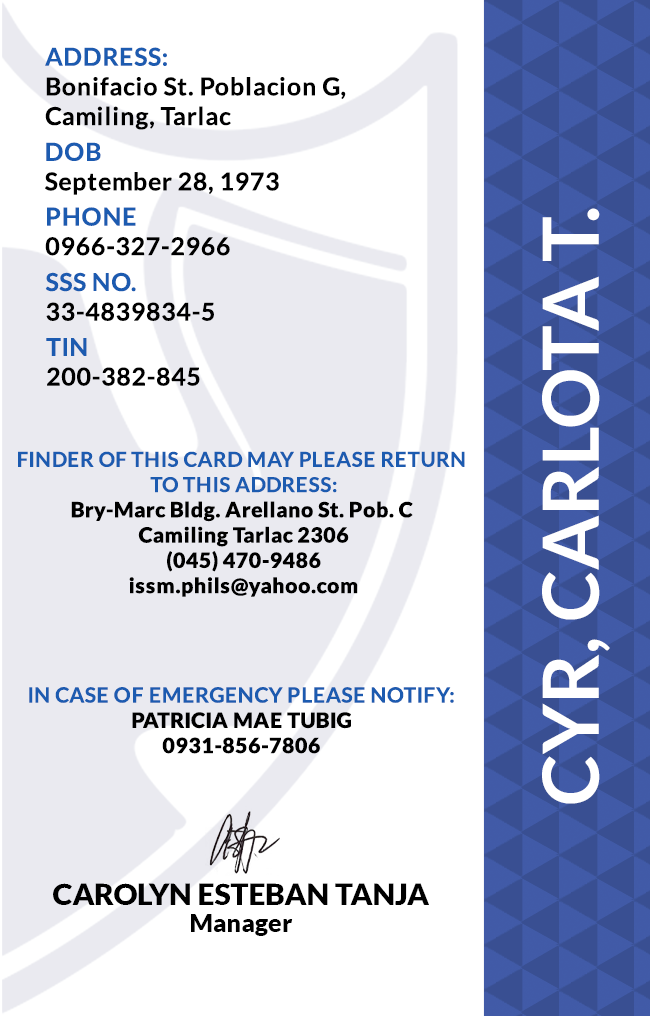
<style>
.page{position:relative;width:650px;height:1016px;background:#ffffff}
.page>*{position:absolute;margin:0}
.t1{font:24.7px/29.6px "Lato-Bold";letter-spacing:0.025em;color:#000000}
.t2{font:24.7px/29.6px "Lato-Bold";letter-spacing:0.025em}
.t3{font:77.6px "Lato-Bold";color:#ffffff}
.t4{font:21.1px "Lato-Black";letter-spacing:0.025em}
.t5{font:20.5px/25.3px "Lato-Bold";letter-spacing:0.025em;text-transform:uppercase}
.t6{font:21.1px/25.3px "Lato-Bold";letter-spacing:0.025em}
.t7{font:29.5px "Lato-Black";color:#000000}
.t8{font:25px "Lato-Black";color:#000000}
</style>
<div class="page">
<p class="t1" style="left:45px;top:47px;width:301px;height:83px">ADDRESS:<br>Bonifacio St. Poblacion G,<br>Camiling, Tarlac</p>
<p class="t1" style="left:45px;top:142px;width:234px;height:53px">DOB<br>September 28, 1973</p>
<p class="t2" style="left:45px;top:207px;width:185px;height:49px">PHONE <br>0966-327-2966</p>
<p class="t3" style="left:542px;top:208px;width:68px;height:596px;rotate:-90deg">CYR, CARLOTA T.</p>
<p class="t2" style="left:45px;top:272px;width:169px;height:49px">SSS NO.<br>33-4839834-5</p>
<p class="t1" style="left:46px;top:338px;width:154px;height:48px">TIN<br>200-382-845</p>
<p class="t4" style="left:18px;top:451px;width:447px;height:146px;text-align:center"><span class="t5">Finder of this card may please return <br>to this address:<br></span>Bry-Marc Bldg. Arellano St. Pob. C <br>Camiling Tarlac 2306<br>(045) 470-9486<br>issm.phils@yahoo.com</p>
<p class="t6" style="left:29px;top:687px;width:425px;height:67px;text-align:center">IN CASE OF EMERGENCY PLEASE NOTIFY:<br><span class="t4">PATRICIA MAE TUBIG<br>0931-856-7806</span></p>
<p class="t7" style="left:53px;top:883px;width:376px;height:22px">CAROLYN ESTEBAN TANJA</p>
<p class="t8" style="left:191px;top:914px;width:102px;height:22px">Manager</p>
</div>
